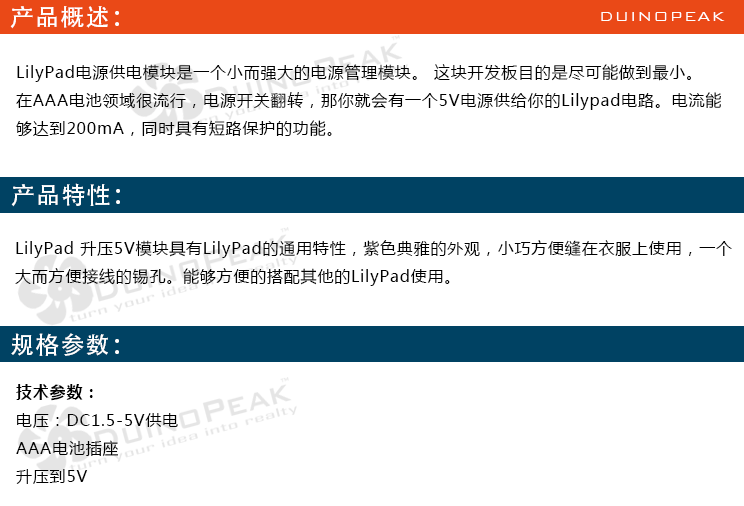
<style>
.page{position:relative;width:744px;height:506px;background:#ffffff}
.page>*{position:absolute;margin:0}
.t1{font:24px "AdobeHeitiStd-Regular";letter-spacing:0.05em;color:#ffffff}
.t2{font:18px "BankGothicBT-Light";letter-spacing:0.05em;color:#ffffff}
.t3{font:16px "MicrosoftYaHei";letter-spacing:0.05em;color:#000000}
.t4{font:16px "MicrosoftYaHei-Bold";letter-spacing:0.05em;color:#000000}
</style>
<div class="page">
<p class="t1" style="left:10px;top:6px;width:109px;height:23px">产品概述：</p>
<p class="t2" style="left:601px;top:12px;width:124px;height:9px">DUINOPEAK</p>
<p class="t3" style="left:16px;top:64px;width:705px;height:73px">LilyPad电源供电模块是一个小而强大的电源管理模块。 这块开发板目的是尽可能做到最小。<br>在AAA电池领域很流行，电源开关翻转，那你就会有一个5V电源供给你的Lilypad电路。电流能<br>够达到200mA，同时具有短路保护的功能。</p>
<p class="t1" style="left:11px;top:183px;width:109px;height:24px">产品特性：</p>
<p class="t3" style="left:15px;top:240px;width:717px;height:46px">LilyPad 升压5V模块具有LilyPad的通用特性，紫色典雅的外观，小巧方便缝在衣服上使用，一个<br>大而方便接线的锡孔。能够方便的搭配其他的LilyPad使用。</p>
<p class="t1" style="left:11px;top:333px;width:108px;height:23px">规格参数：</p>
<p class="t3" style="left:16px;top:384px;width:162px;height:100px"><span class="t4">技术参数：<br></span>电压：DC1.5-5V供电<br>AAA电池插座<br>升压到5V</p>
</div>
